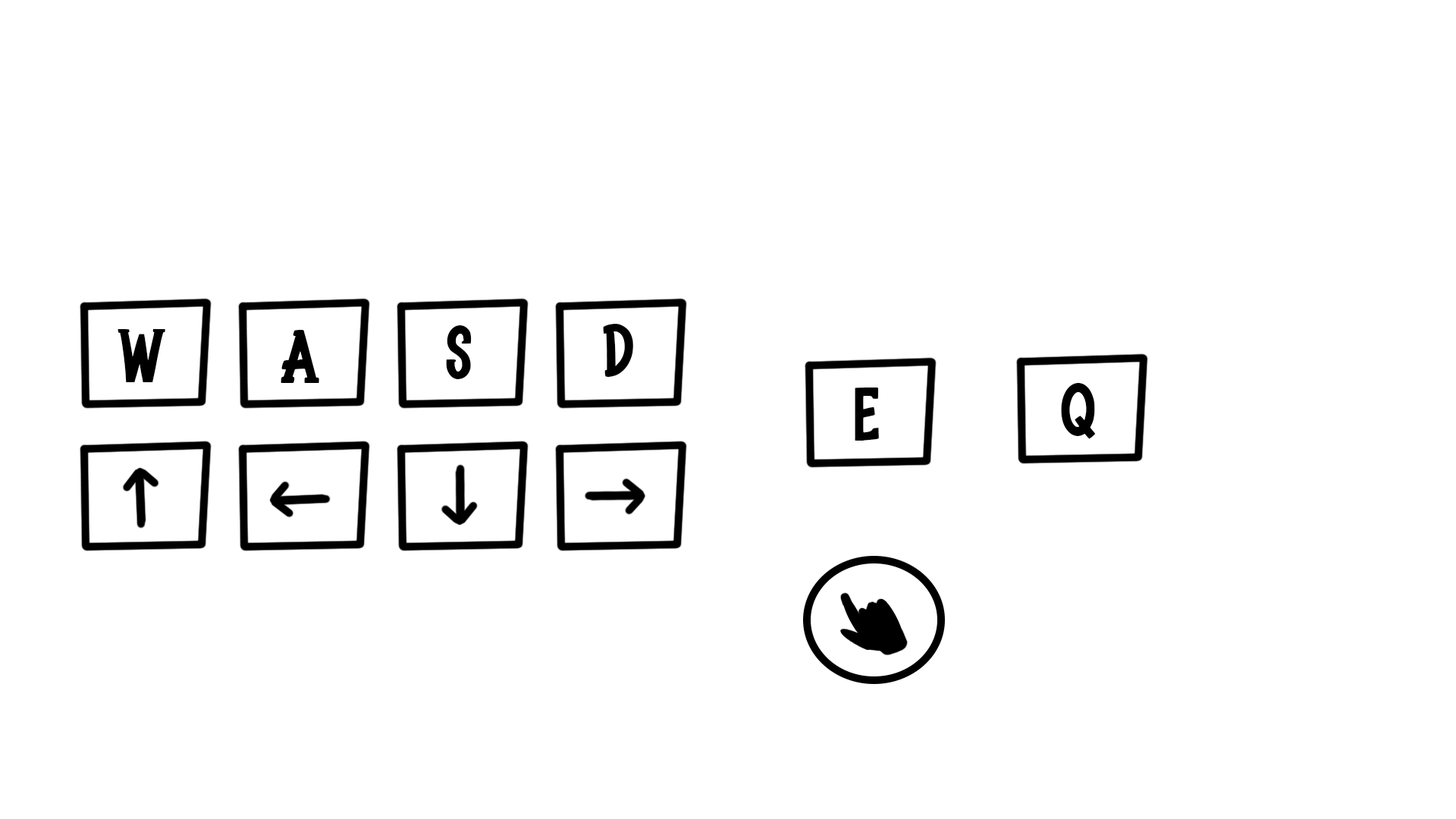
<style>
.page{position:relative;width:1456px;height:819px;background:#ffffff}
.page>*{position:absolute;margin:0}
.t1{font:94.8px "LittleRascall-Regular";color:#000000}
</style>
<div class="page">
<p class="t1" style="left:118px;top:328px;width:47px;height:54px">W</p>
<p class="t1" style="left:281px;top:330px;width:38px;height:53px">A</p>
<p class="t1" style="left:446px;top:325px;width:26px;height:54px">S</p>
<p class="t1" style="left:603px;top:324px;width:30px;height:53px">D</p>
<p class="t1" style="left:855px;top:388px;width:24px;height:53px">E</p>
<p class="t1" style="left:1061px;top:383px;width:35px;height:56px">Q</p>
</div>
